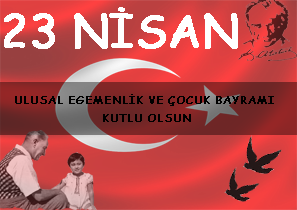
<style>
.page{position:relative;width:297px;height:210px}
.page>*{position:absolute;margin:0}
.t1{font:45px "ComicSansMS";color:#ffffff;font-weight:bold}
.t2{font:11px/18px "ComicSansMS";color:#000000;font-weight:bold}
</style>
<div class="page">
<p class="t1" style="left:4px;top:7px;width:234px;height:42px">23 NİSAN</p>
<p class="t2" style="left:15px;top:94px;width:259px;height:28px">ULUSAL EGEMENLİK VE ÇOCUK BAYRAMI <br>                      KUTLU OLSUN</p>
</div>
